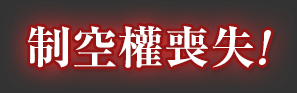
<style>
.page{position:relative;width:297px;height:93px}
.page>*{position:absolute;margin:0}
.t1{font:45px "RyuminPro-ExBold";color:#ffffff}
.t2{font:45px "RyuminPro-ExBold";color:#ffffff;font-style:italic}
</style>
<div class="page">
<p class="t1" style="left:27px;top:25px;width:244px;height:43px">制空權喪失<span class="t2">!</span></p>
</div>
